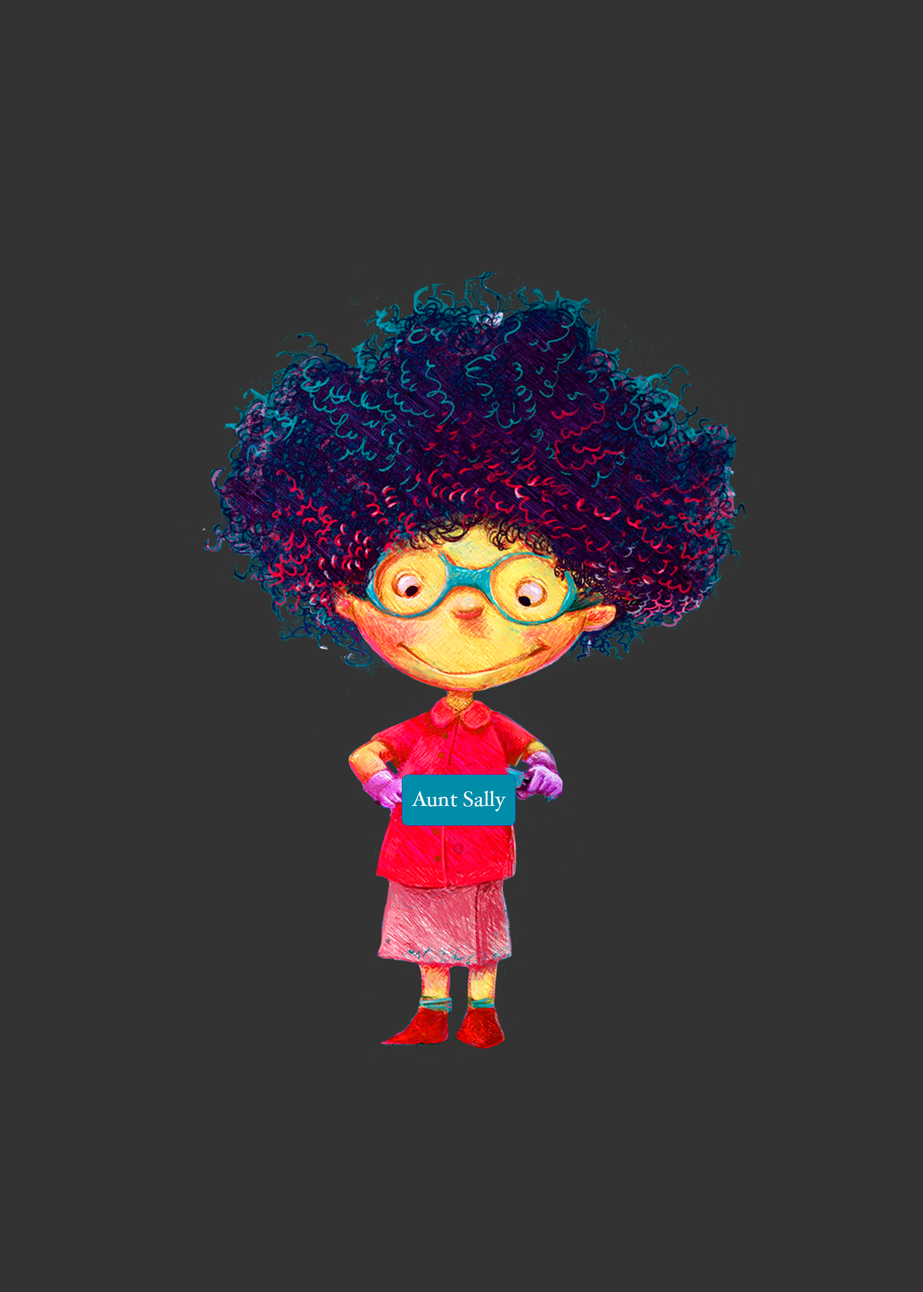
<style>
.page{position:relative;width:923px;height:1292px;background:#333333}
.page>*{position:absolute;margin:0}
.t1{font:21.6px "HoeflerText-Regular";color:#eff5f4}
</style>
<div class="page">
<p class="t1" style="left:412px;top:791px;width:94px;height:21px">Aunt Sally</p>
</div>
